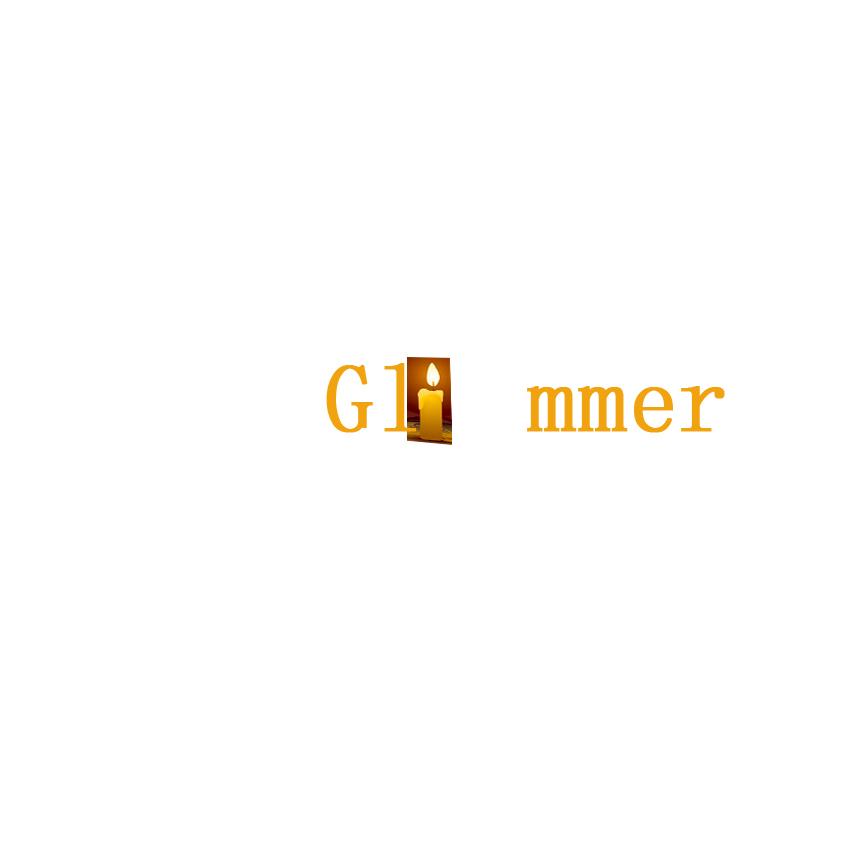
<style>
.page{position:relative;width:855px;height:854px;background:#ffffff}
.page>*{position:absolute;margin:0}
.t1{font:96px "SimSun";color:#f0a30f;font-weight:bold}
</style>
<div class="page">
<p class="t1" style="left:326px;top:363px;width:399px;height:70px">Gl  mmer</p>
</div>
